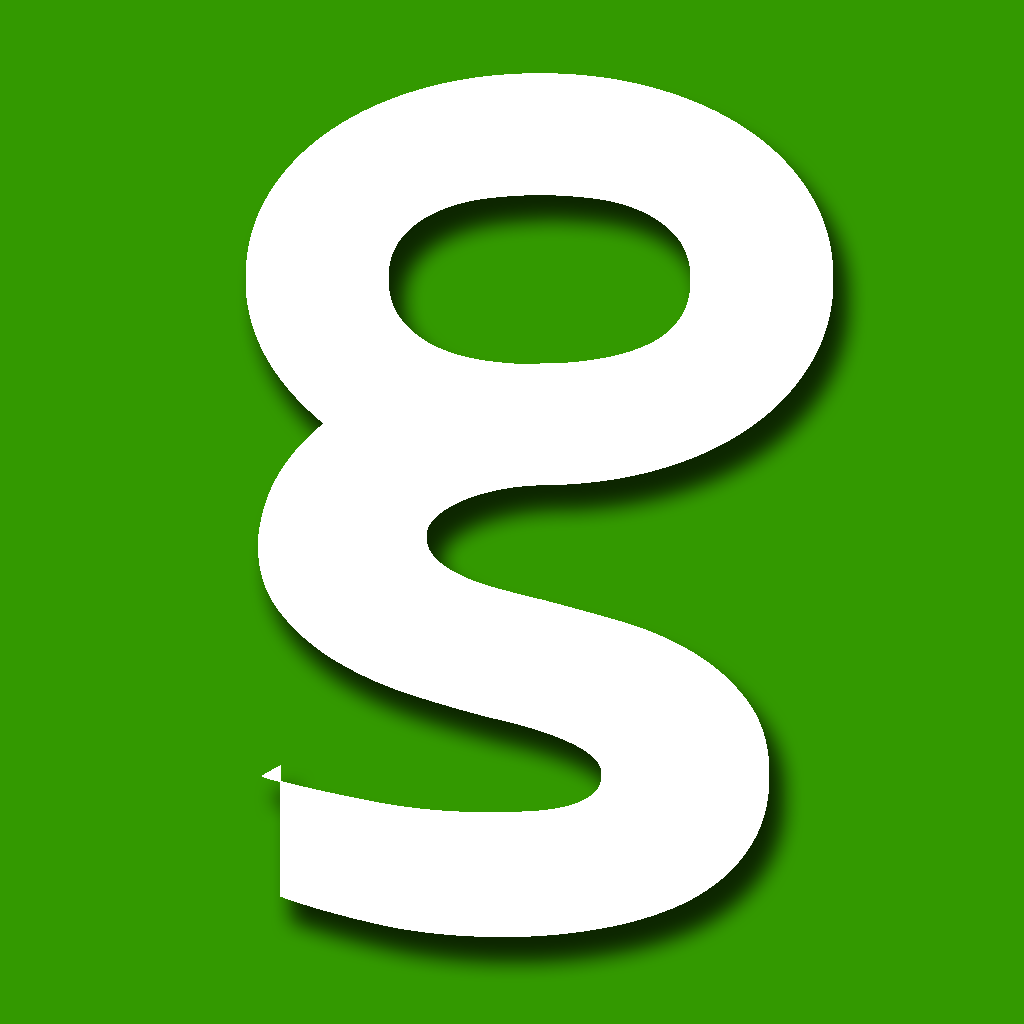
<style>
.page{position:relative;width:1024px;height:1024px;background:#339900}
.page>*{position:absolute;margin:0}
.t1{font:1154.9px "newdreamers";color:#ffffff}
</style>
<div class="page">
<p class="t1" style="left:246px;top:73px;width:587px;height:864px">g</p>
</div>
